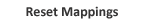
<style>
.page{position:relative;width:144px;height:23px;background:#ffffff}
.page>*{position:absolute;margin:0}
.t1{font:14px "Calibri-Bold";color:#363535}
</style>
<div class="page">
<p class="t1" style="left:26px;top:6px;width:92px;height:13px">Reset Mappings</p>
</div>
